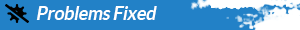
<style>
.page{position:relative;width:300px;height:30px;background:#2281c7}
.page>*{position:absolute;margin:0}
.t1{font:18px "Lato-Bold";letter-spacing:-0.02em;color:#ffffff;font-style:italic}
</style>
<div class="page">
<p class="t1" style="left:36px;top:6px;width:121px;height:14px">Problems Fixed</p>
</div>
